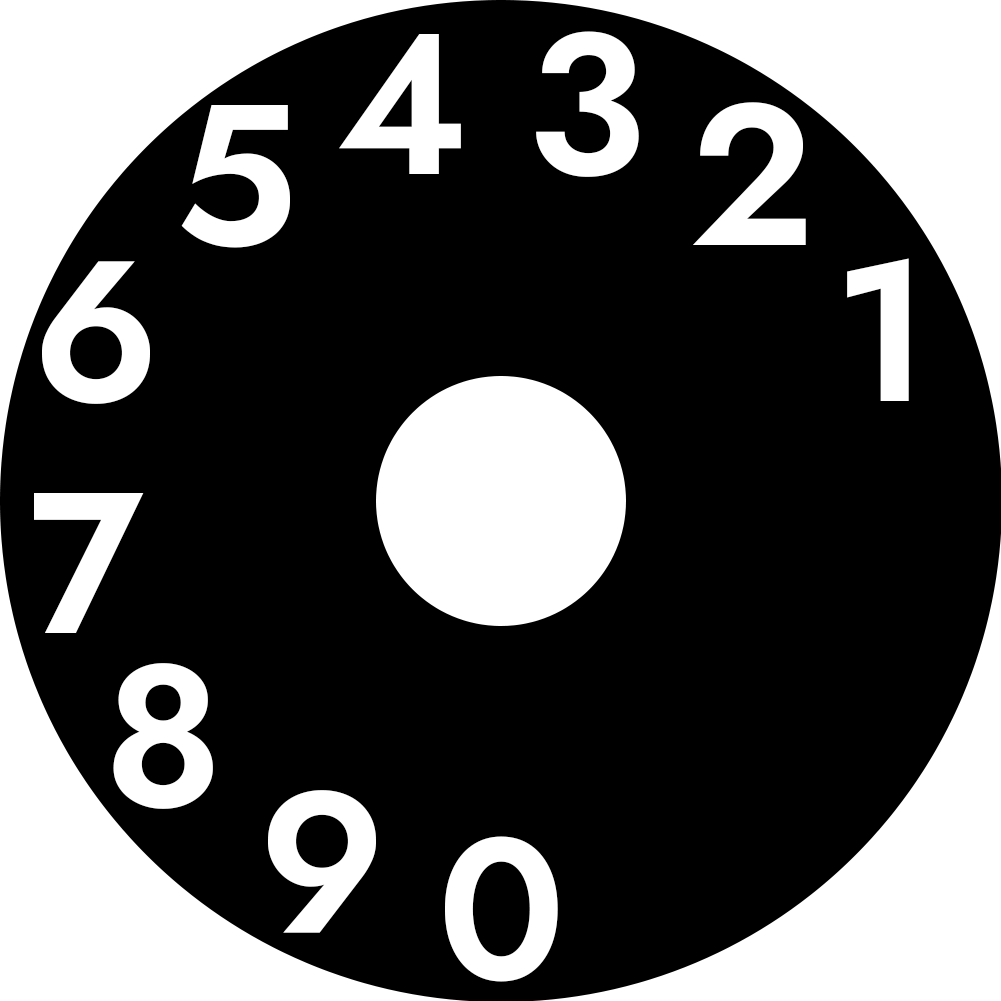
<style>
.page{position:relative;width:1001px;height:1001px;background:#000000}
.page>*{position:absolute;margin:0}
.t1{font:200px "Jost-SemiBold";color:#ffffff}
</style>
<div class="page">
<p class="t1" style="left:339px;top:34px;width:122px;height:140px">4</p>
<p class="t1" style="left:536px;top:31px;width:103px;height:146px">3</p>
<p class="t1" style="left:693px;top:102px;width:113px;height:143px">2</p>
<p class="t1" style="left:181px;top:105px;width:109px;height:143px">5</p>
<p class="t1" style="left:42px;top:261px;width:108px;height:143px">6</p>
<p class="t1" style="left:847px;top:258px;width:62px;height:143px">1</p>
<p class="t1" style="left:34px;top:493px;width:110px;height:140px">7</p>
<p class="t1" style="left:113px;top:663px;width:100px;height:146px">8</p>
<p class="t1" style="left:268px;top:790px;width:108px;height:143px">9</p>
<p class="t1" style="left:445px;top:836px;width:113px;height:146px">0</p>
</div>
